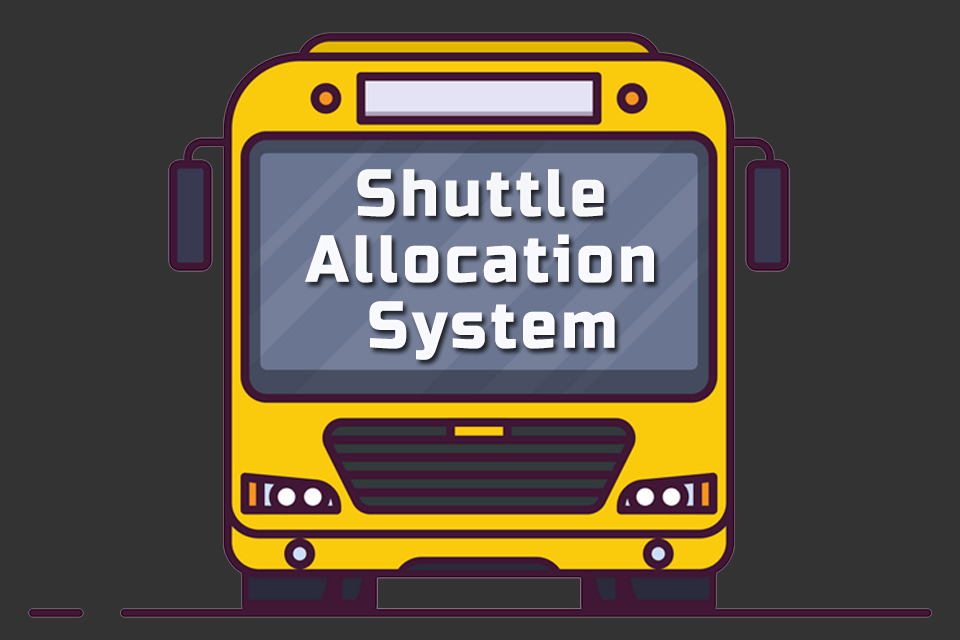
<style>
.page{position:relative;width:960px;height:640px;background:#333333}
.page>*{position:absolute;margin:0}
.t1{font:66.4px/66px "RussoOne-Regular";letter-spacing:0.075em;color:#f8f9fe;scale:0.9 1}
.t2{font:66.4px/66px "RussoOne-Regular";letter-spacing:0.075em;color:#f5f6f9;scale:0.9 1}
</style>
<div class="page">
<p class="t1" style="left:305px;top:169px;width:349px;height:191px;text-align:center"><span class="t2">Shuttle <br></span>Allocation <br>System</p>
</div>
